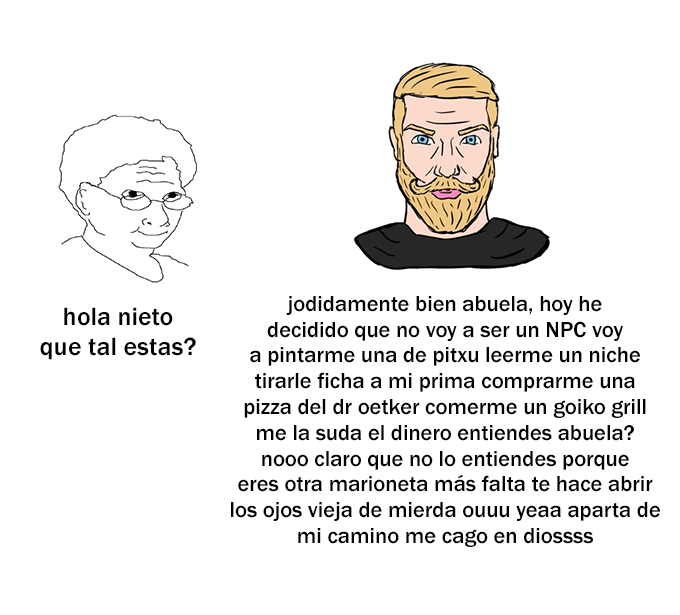
<style>
.page{position:relative;width:680px;height:615px;background:#ffffff}
.page>*{position:absolute;margin:0}
.t1{font:22.5px "FranklinGothic-Medium";color:#000000}
.t2{font:26.1px "FranklinGothic-Medium";color:#000000}
</style>
<div class="page">
<p class="t1" style="left:231px;top:296px;width:429px;height:251px;text-align:center">jodidamente bien abuela, hoy he<br>decidido que no voy a ser un NPC voy<br>a pintarme una de pitxu leerme un niche<br>tirarle ficha a mi prima comprarme una<br>pizza del dr oetker comerme un goiko grill<br>me la suda el dinero entiendes abuela?<br>nooo claro que no lo entiendes porque<br>eres otra marioneta más falta te hace abrir<br>los ojos vieja de mierda ouuu yeaa aparta de<br>mi camino me cago en diossss</p>
<p class="t2" style="left:40px;top:307px;width:156px;height:53px;text-align:center">hola nieto<br>que tal estas?</p>
</div>
